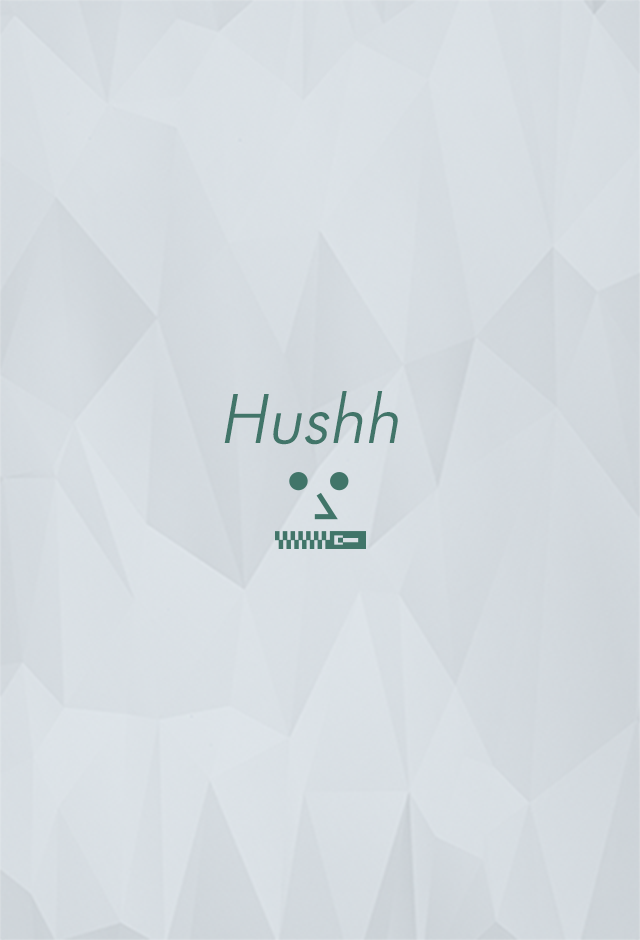
<style>
.page{position:relative;width:640px;height:940px}
.page>*{position:absolute;margin:0}
.t1{font:68px "FuturiLightRegularSWFTE";color:#417569;font-style:italic}
</style>
<div class="page">
<p class="t1" style="left:224px;top:391px;width:174px;height:54px">Hushh</p>
</div>
